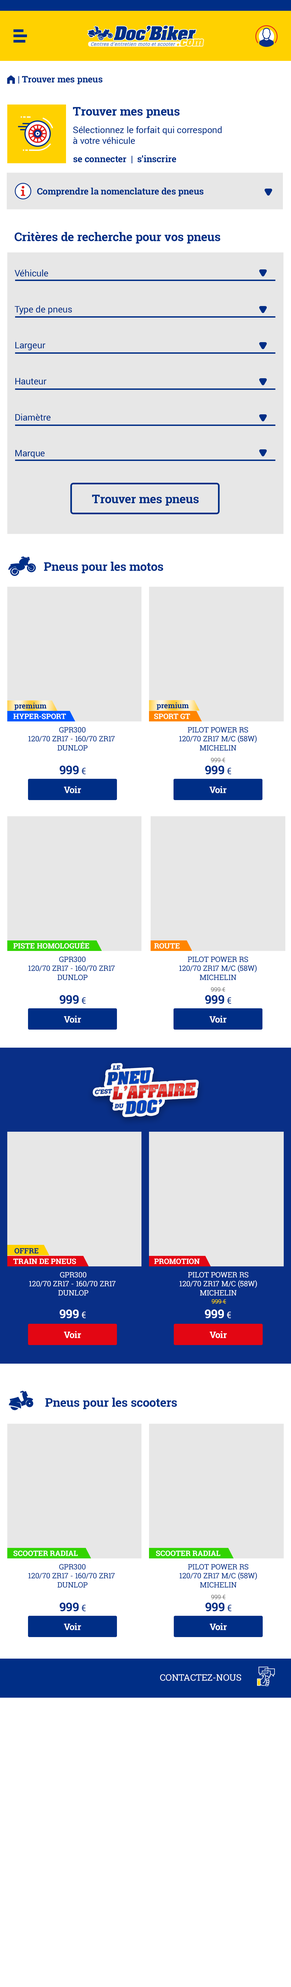
<style>
.page{position:relative;width:291px;height:1987px;background:#ffffff}
.page>*{position:absolute;margin:0}
.t1{font:9px "RobotoSlab-Bold";color:#002e86}
.t2{font:9px "FoundationIconsGeneral-Reg";color:#002e86}
.t3{font:12px "RobotoSlab-Bold";color:#002e86}
.t4{font:9px "Roboto-Regular";color:#002e86}
.t5{font:9px/36px "Roboto-Regular";color:#002e86}
.t6{font:7.5px "RobotoSlab-Bold";color:#ffffff}
.t7{font:7.5px "RobotoSlab-Bold";color:#002e86}
.t8{font:7.5px "RobotoSlab-Regular";color:#002e86}
.t9{font:6px "RobotoSlab-Regular";color:#767676}
.t10{font:9px "RobotoSlab-Regular";color:#002e86}
.t11{font:9px "RobotoSlab-Bold";color:#fefefe}
.t12{font:7.5px "RobotoSlab-Regular";color:#ffffff}
.t13{font:6px "RobotoSlab-Regular";color:#ffd100}
.t14{font:12px "RobotoSlab-Bold";color:#ffffff}
.t15{font:9px "RobotoSlab-Regular";color:#ffffff}
.t16{font:9px "RobotoSlab-Regular";color:#ffffff;text-transform:uppercase}
</style>
<div class="page">
<p class="t1" style="left:7px;top:75px;width:96px;height:9px"><span class="t2">m </span>| Trouver mes pneus</p>
<p class="t3" style="left:73px;top:107px;width:107px;height:11px">Trouver mes pneus</p>
<p class="t4" style="left:73px;top:126px;width:149px;height:18px">Sélectionnez le forfait qui correspond <br>à votre véhicule</p>
<p class="t1" style="left:73px;top:155px;width:103px;height:9px">se connecter  |  s’inscrire</p>
<p class="t1" style="left:37px;top:188px;width:167px;height:8px">Comprendre la nomenclature des pneus</p>
<p class="t3" style="left:15px;top:232px;width:205px;height:12px">Critères de recherche pour vos pneus</p>
<p class="t5" style="left:15px;top:269px;width:57px;height:189px">Véhicule<br>Type de pneus<br>Largeur<br>Hauteur<br>Diamètre<br>Marque</p>
<p class="t3" style="left:92px;top:495px;width:107px;height:11px">Trouver mes pneus</p>
<p class="t3" style="left:44px;top:562px;width:119px;height:11px">Pneus pour les motos</p>
<p class="t6" style="left:13px;top:714px;width:53px;height:5px">HYPER-SPORT</p>
<p class="t7" style="left:14px;top:703px;width:33px;height:7px">premium</p>
<p class="t6" style="left:154px;top:714px;width:36px;height:5px">SPORT GT</p>
<p class="t7" style="left:157px;top:702px;width:32px;height:8px">premium</p>
<p class="t8" style="left:28px;top:727px;width:87px;height:24px;text-align:center">GPR300<br>120/70 ZR17 - 160/70 ZR17 <br>DUNLOP</p>
<p class="t8" style="left:179px;top:727px;width:78px;height:24px;text-align:center">PILOT POWER RS<br>120/70 ZR17 M/C (58W)<br>MICHELIN</p>
<p class="t9" style="left:211px;top:758px;width:15px;height:5px">999 €</p>
<p class="t3" style="left:60px;top:766px;width:26px;height:9px">999<span class="t10"> €</span></p>
<p class="t3" style="left:205px;top:766px;width:26px;height:9px">999<span class="t10"> €</span></p>
<p class="t11" style="left:64px;top:786px;width:17px;height:8px">Voir</p>
<p class="t11" style="left:209px;top:786px;width:18px;height:8px">Voir</p>
<p class="t6" style="left:13px;top:942px;width:76px;height:7px">PISTE HOMOLOGUÉE</p>
<p class="t6" style="left:154px;top:943px;width:26px;height:6px">ROUTE</p>
<p class="t8" style="left:28px;top:957px;width:87px;height:24px;text-align:center">GPR300<br>120/70 ZR17 - 160/70 ZR17 <br>DUNLOP</p>
<p class="t8" style="left:179px;top:957px;width:78px;height:24px;text-align:center">PILOT POWER RS<br>120/70 ZR17 M/C (58W)<br>MICHELIN</p>
<p class="t9" style="left:211px;top:988px;width:15px;height:4px">999 €</p>
<p class="t3" style="left:60px;top:995px;width:26px;height:9px">999<span class="t10"> €</span></p>
<p class="t3" style="left:205px;top:995px;width:26px;height:9px">999<span class="t10"> €</span></p>
<p class="t11" style="left:64px;top:1016px;width:17px;height:7px">Voir</p>
<p class="t11" style="left:209px;top:1016px;width:18px;height:7px">Voir</p>
<p class="t7" style="left:15px;top:1248px;width:24px;height:6px">OFFRE</p>
<p class="t6" style="left:13px;top:1259px;width:63px;height:6px">TRAIN DE PNEUS</p>
<p class="t6" style="left:154px;top:1259px;width:46px;height:6px">PROMOTION</p>
<p class="t12" style="left:29px;top:1272px;width:87px;height:24px;text-align:center">GPR300<br>120/70 ZR17 - 160/70 ZR17 <br>DUNLOP</p>
<p class="t12" style="left:179px;top:1272px;width:78px;height:24px;text-align:center">PILOT POWER RS<br>120/70 ZR17 M/C (58W)<br>MICHELIN</p>
<p class="t13" style="left:212px;top:1300px;width:14px;height:4px">999 €</p>
<p class="t14" style="left:60px;top:1310px;width:26px;height:9px">999<span class="t15"> €</span></p>
<p class="t14" style="left:205px;top:1310px;width:26px;height:9px">999<span class="t15"> €</span></p>
<p class="t11" style="left:64px;top:1331px;width:17px;height:8px">Voir</p>
<p class="t11" style="left:210px;top:1331px;width:17px;height:8px">Voir</p>
<p class="t3" style="left:45px;top:1398px;width:132px;height:11px">Pneus pour les scooters</p>
<p class="t6" style="left:13px;top:1551px;width:65px;height:6px">SCOOTER RADIAL</p>
<p class="t6" style="left:156px;top:1551px;width:64px;height:6px">SCOOTER RADIAL</p>
<p class="t8" style="left:28px;top:1564px;width:87px;height:24px;text-align:center">GPR300<br>120/70 ZR17 - 160/70 ZR17 <br>DUNLOP</p>
<p class="t8" style="left:179px;top:1564px;width:78px;height:24px;text-align:center">PILOT POWER RS<br>120/70 ZR17 M/C (58W)<br>MICHELIN</p>
<p class="t9" style="left:211px;top:1595px;width:15px;height:5px">999 €</p>
<p class="t3" style="left:60px;top:1603px;width:26px;height:9px">999<span class="t10"> €</span></p>
<p class="t3" style="left:205px;top:1603px;width:26px;height:9px">999<span class="t10"> €</span></p>
<p class="t11" style="left:64px;top:1623px;width:17px;height:8px">Voir</p>
<p class="t11" style="left:210px;top:1623px;width:17px;height:8px">Voir</p>
<p class="t16" style="left:160px;top:1675px;width:81px;height:6px">contactez-nous</p>
</div>
